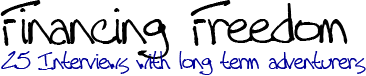
<style>
.page{position:relative;width:366px;height:76px;background:#ffffff}
.page>*{position:absolute;margin:0}
.t1{font:72px "TallPaul";color:#000000}
.t2{font:30px "TallPaul";color:#000099}
</style>
<div class="page">
<p class="t1" style="left:0px;top:0px;width:348px;height:59px">Financing Freedom</p>
<p class="t2" style="left:1px;top:51px;width:365px;height:24px">25 Interviews with long term adventurers</p>
</div>
